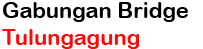
<style>
.page{position:relative;width:203px;height:49px;background:#ffffff}
.page>*{position:absolute;margin:0}
.t1{font:22px "ArialRoundedMTBold";color:#000000}
.t2{font:22px "ArialRoundedMTBold";color:#ff0808}
</style>
<div class="page">
<p class="t1" style="left:2px;top:2px;width:186px;height:47px">Gabungan Bridge <br><span class="t2">Tulungagung</span></p>
</div>
